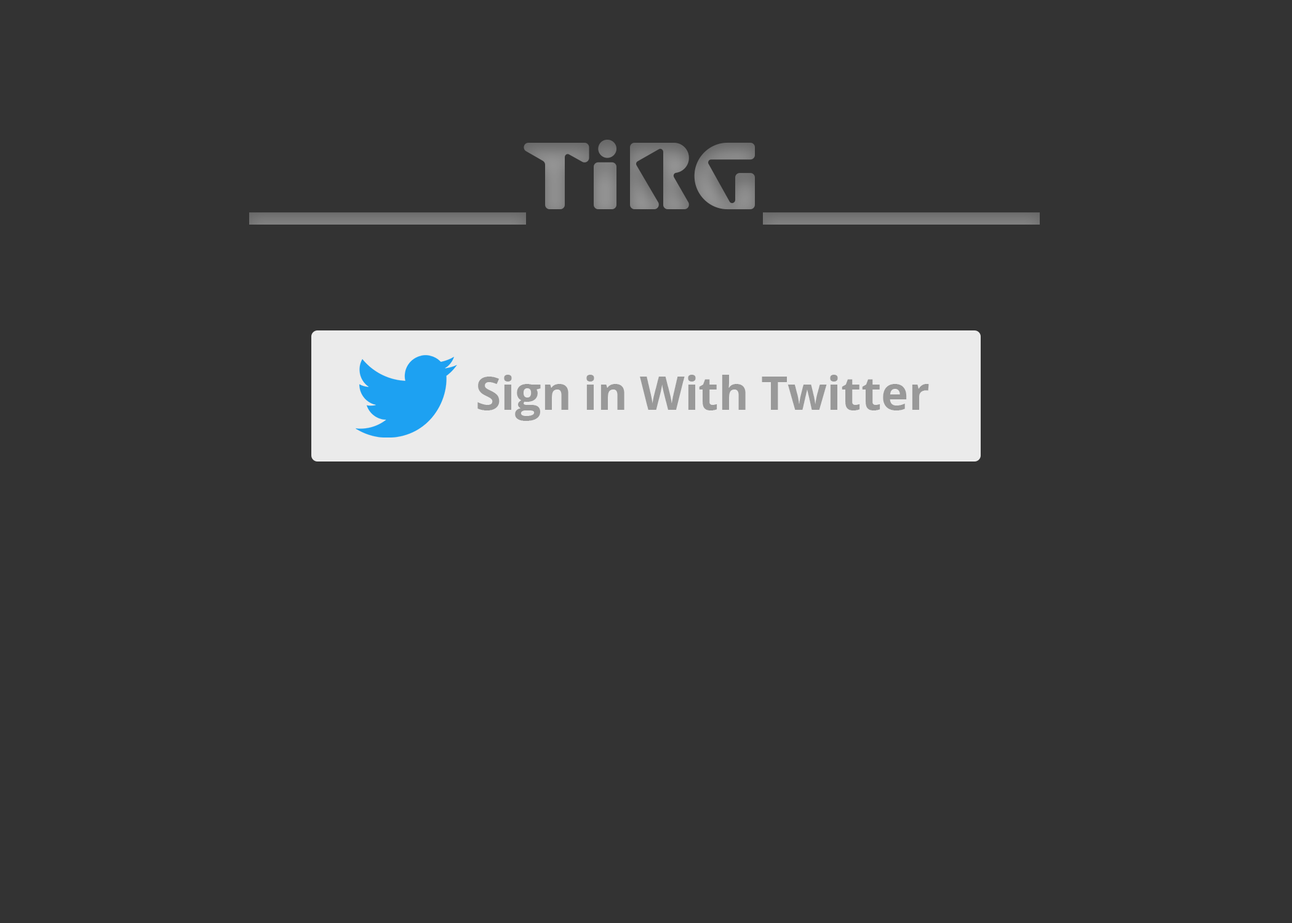
<style>
.page{position:relative;width:1292px;height:923px;background:#333333}
.page>*{position:absolute;margin:0}
.t1{font:92.3px "ShurikenStd-Boy";color:#7d7d7d}
.t2{font:46.1px "OpenSans-Bold";color:#999999}
</style>
<div class="page">
<p class="t1" style="left:249px;top:140px;width:791px;height:85px">______TiRG______</p>
<p class="t2" style="left:477px;top:375px;width:452px;height:46px">Sign in With Twitter</p>
</div>
